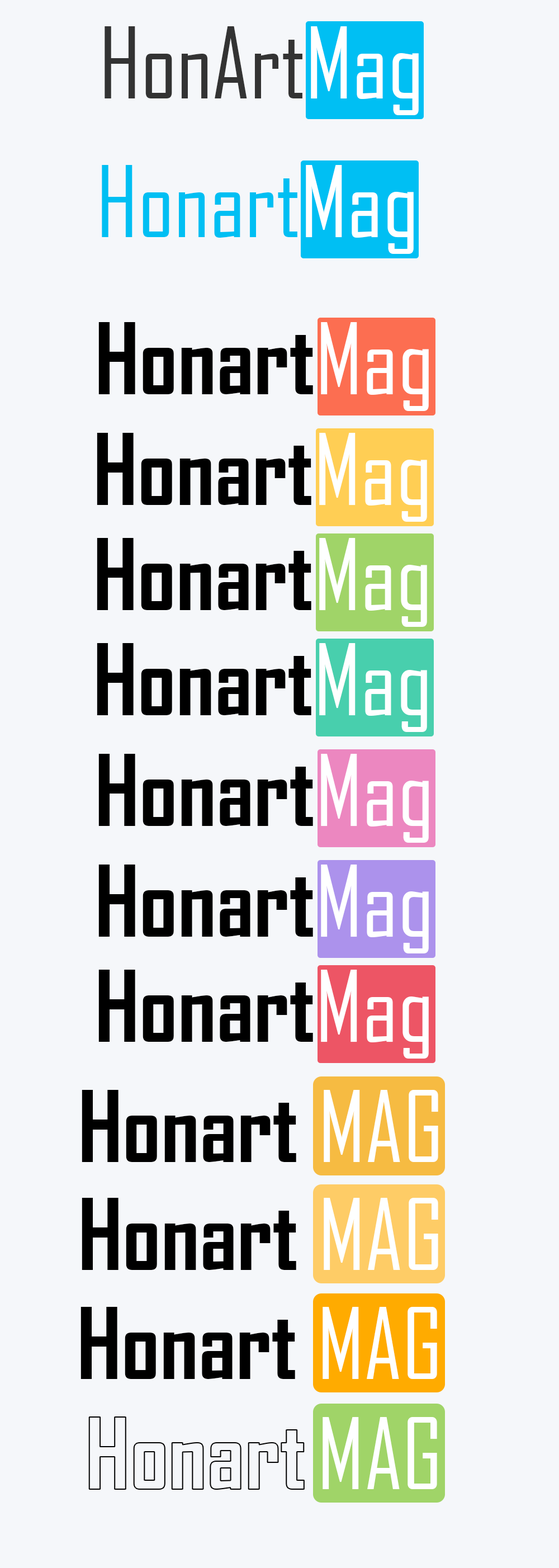
<style>
.page{position:relative;width:559px;height:1568px;background:#f5f7fa}
.page>*{position:absolute;margin:0}
.t1{font:94.5px "AgencyFB-Reg";color:#333333}
.t2{font:94.5px "AgencyFB-Reg";color:#ffffff}
.t3{font:94.5px "AgencyFB-Bold";color:#000000}
.t4{font:94.5px "AgencyFB-Reg";color:#feffff}
</style>
<div class="page">
<p class="t1" style="left:105px;top:26px;width:314px;height:89px">HonArt<span class="t2">Mag</span></p>
<p class="t3" style="left:98px;top:322px;width:331px;height:89px">Honart<span class="t4">Mag</span></p>
<p class="t3" style="left:97px;top:433px;width:330px;height:89px">Honart<span class="t4">Mag</span></p>
<p class="t3" style="left:97px;top:538px;width:330px;height:89px">Honart<span class="t4">Mag</span></p>
<p class="t3" style="left:97px;top:643px;width:330px;height:89px">Honart<span class="t4">Mag</span></p>
<p class="t3" style="left:98px;top:754px;width:331px;height:89px">Honart<span class="t4">Mag</span></p>
<p class="t3" style="left:98px;top:865px;width:331px;height:88px">Honart<span class="t4">Mag</span></p>
<p class="t3" style="left:98px;top:970px;width:331px;height:89px">Honart<span class="t4">Mag</span></p>
<p class="t3" style="left:82px;top:1090px;width:356px;height:72px">Honart <span class="t4">MAG</span></p>
<p class="t3" style="left:82px;top:1198px;width:356px;height:72px">Honart <span class="t4">MAG</span></p>
<p class="t3" style="left:81px;top:1307px;width:356px;height:72px">Honart <span class="t4">MAG</span></p>
<p class="t4" style="left:323px;top:1417px;width:114px;height:72px">MAG</p>
</div>
